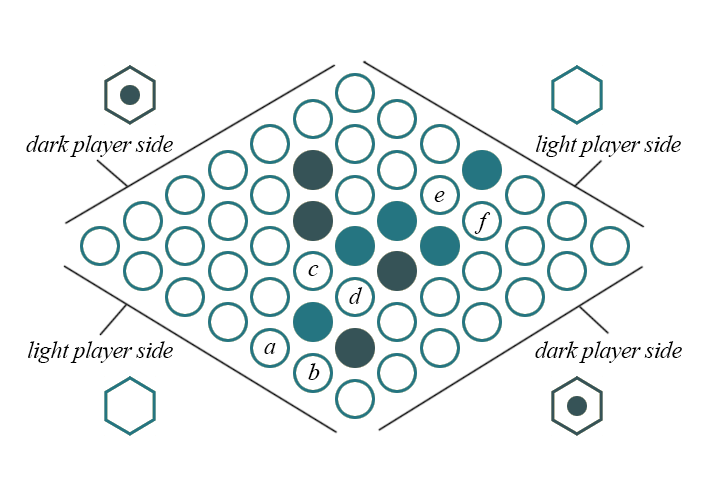
<style>
.page{position:relative;width:714px;height:487px;background:#ffffff}
.page>*{position:absolute;margin:0}
.t1{font:24px "TimesNewRomanPS-ItalicMT";letter-spacing:-0.025em;color:#000000}
</style>
<div class="page">
<p class="t1" style="left:26px;top:135px;width:147px;height:22px">dark player side</p>
<p class="t1" style="left:536px;top:135px;width:145px;height:22px">light player side</p>
<p class="t1" style="left:434px;top:191px;width:11px;height:11px">e</p>
<p class="t1" style="left:474px;top:212px;width:17px;height:22px">f</p>
<p class="t1" style="left:308px;top:265px;width:11px;height:11px">c</p>
<p class="t1" style="left:349px;top:287px;width:14px;height:17px">d</p>
<p class="t1" style="left:28px;top:341px;width:145px;height:22px">light player side</p>
<p class="t1" style="left:535px;top:341px;width:147px;height:22px">dark player side</p>
<p class="t1" style="left:264px;top:343px;width:12px;height:11px">a</p>
<p class="t1" style="left:308px;top:363px;width:12px;height:17px">b</p>
</div>
